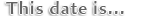
<style>
.page{position:relative;width:142px;height:16px;background:#ffffff}
.page>*{position:absolute;margin:0}
.t1{font:18px "AmiraParadiso";letter-spacing:0.05em;color:#646464}
</style>
<div class="page">
<p class="t1" style="left:6px;top:1px;width:118px;height:13px">This date is...</p>
</div>
